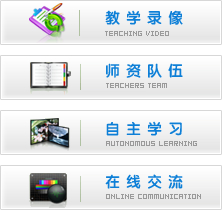
<style>
.page{position:relative;width:222px;height:210px;background:#ffffff}
.page>*{position:absolute;margin:0}
.t1{font:15px "FZY4JW--GB1-0";letter-spacing:0.4em;color:#0d7fd7}
.t2{font:8px "04b03b";color:#9a9a9a;text-transform:uppercase}
</style>
<div class="page">
<p class="t1" style="left:105px;top:10px;width:78px;height:15px">教学录像</p>
<p class="t2" style="left:105px;top:31px;width:64px;height:5px">Teaching video</p>
<p class="t1" style="left:106px;top:63px;width:77px;height:15px">师资队伍</p>
<p class="t2" style="left:106px;top:83px;width:61px;height:5px">Teachers team</p>
<p class="t1" style="left:106px;top:121px;width:76px;height:15px">自主学习</p>
<p class="t2" style="left:106px;top:141px;width:91px;height:5px">Autonomous learning</p>
<p class="t1" style="left:105px;top:174px;width:78px;height:15px">在线交流</p>
<p class="t2" style="left:106px;top:194px;width:95px;height:5px">Online communication</p>
</div>
